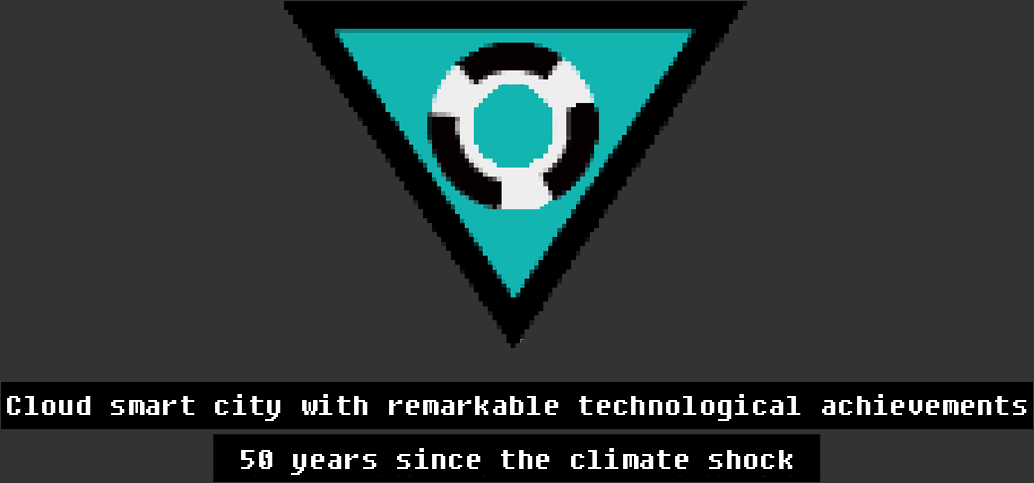
<style>
.page{position:relative;width:1034px;height:483px;background:#333333}
.page>*{position:absolute;margin:0}
.t1{font:34.7px/53.3px "DungGeunMo";color:#ffffff}
</style>
<div class="page">
<p class="t1" style="left:7px;top:394px;width:1020px;height:81px;text-align:center">Cloud smart city with remarkable technological achievements<br> 50 years since the climate shock</p>
</div>
